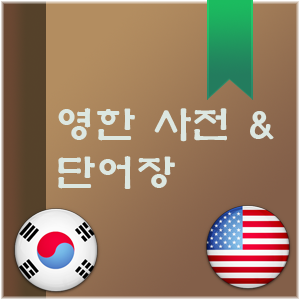
<style>
.page{position:relative;width:300px;height:300px}
.page>*{position:absolute;margin:0}
.t1{font:40px "YetR-HM";color:#dce7e1}
</style>
<div class="page">
<p class="t1" style="left:58px;top:108px;width:216px;height:81px">영한 사전 &amp; <br>단어장</p>
</div>
